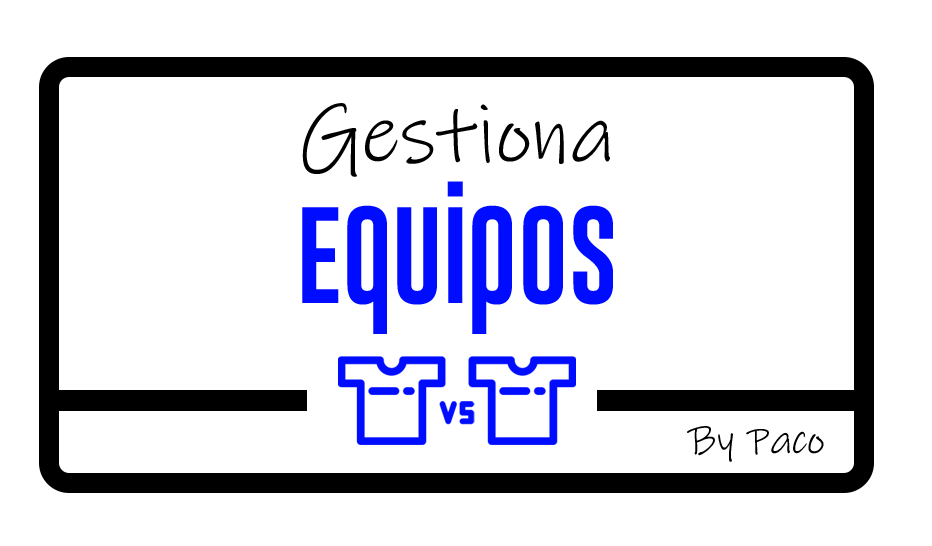
<style>
.page{position:relative;width:932px;height:546px;background:#ffffff}
.page>*{position:absolute;margin:0}
.t1{font:83.3px/141.7px "InkFree";color:#000000}
.t2{font:100px/141.7px "GoboldUplow";color:#000cff}
.t3{font:41.7px "InkFree";color:#000000}
</style>
<div class="page">
<p class="t1" style="left:302px;top:103px;width:311px;height:231px;text-align:center">Gestiona<br><span class="t2">Equipos</span></p>
<p class="t3" style="left:687px;top:426px;width:137px;height:36px">By Paco</p>
</div>
